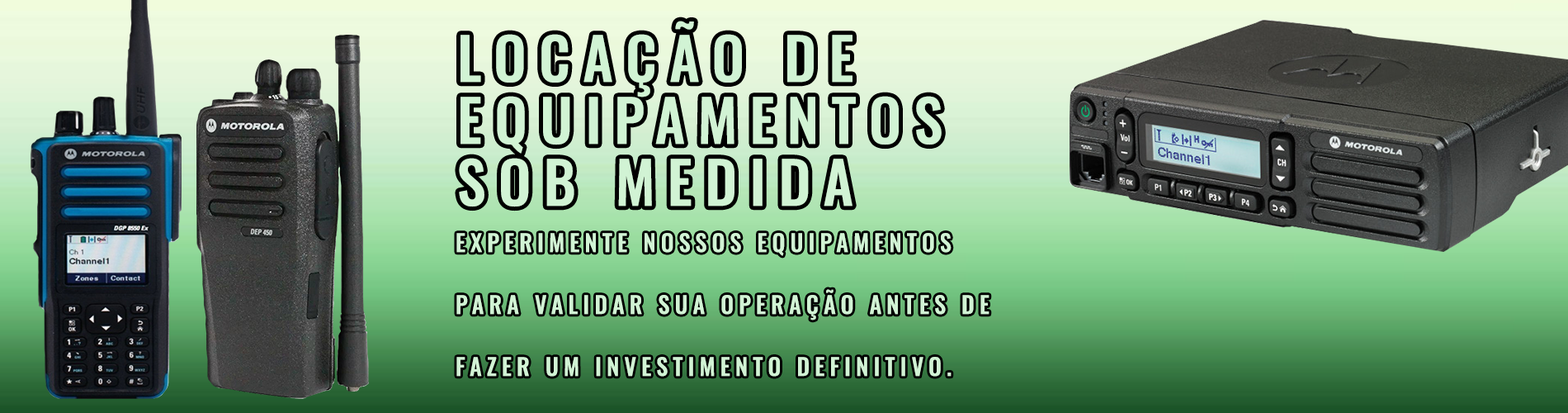
<style>
.page{position:relative;width:1568px;height:413px}
.page>*{position:absolute;margin:0}
.t1{font:22.9px/61.9px "Oswald-Medium";letter-spacing:0.2em;color:#d1f3d4;text-transform:uppercase;font-weight:bold}
</style>
<div class="page">
<p class="t1" style="left:456px;top:233px;width:533px;height:143px;text-align:right">Experimente nossos equipamentos <br>para validar sua operação antes de <br>fazer um investimento definitivo.</p>
</div>
